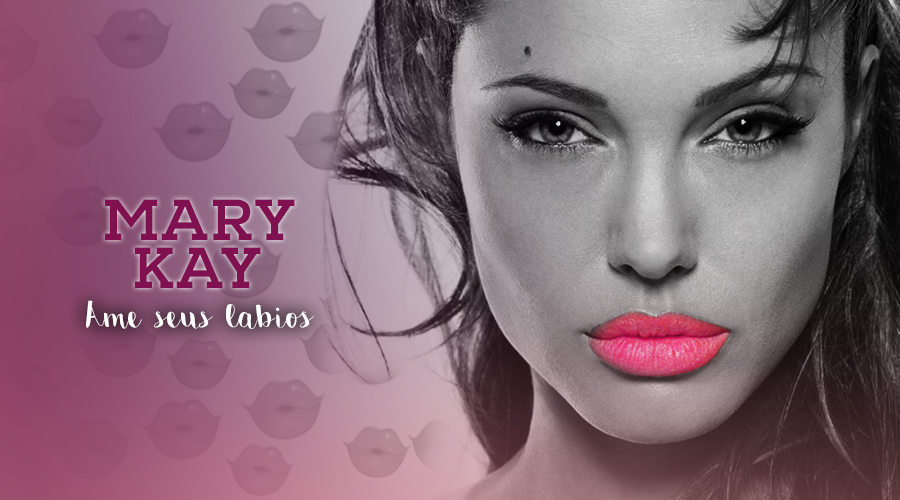
<style>
.page{position:relative;width:900px;height:500px}
.page>*{position:absolute;margin:0}
.t1{font:58.1px/48px "NexaSlab-xBold";letter-spacing:0.02em;color:#801151}
.t2{font:43px "EmilyTheBrushDemo-Regular";letter-spacing:0.02em;color:#ffffff}
</style>
<div class="page">
<p class="t1" style="left:105px;top:199px;width:190px;height:89px">MARY<br>  KAY</p>
<p class="t2" style="left:86px;top:300px;width:228px;height:29px">Ame seus labios</p>
</div>
